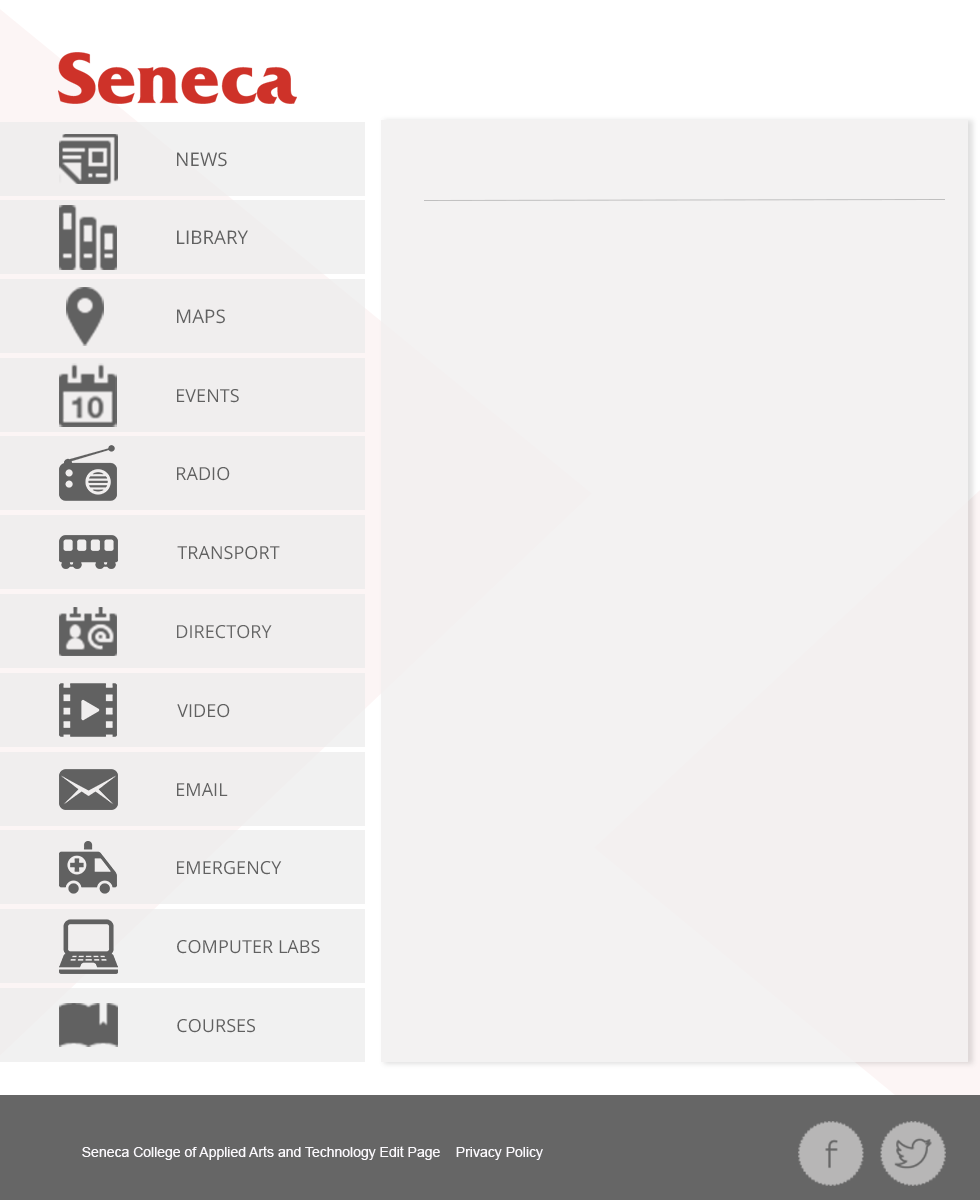
<style>
.page{position:relative;width:980px;height:1200px;background:#f3f2f2}
.page>*{position:absolute;margin:0}
.t1{font:18.7px "OpenSans";color:#616161;text-transform:uppercase}
.t2{font:18px "OpenSans";color:#616161;text-transform:uppercase}
.t3{font:18px "OpenSans";color:#666666;text-transform:uppercase}
.t4{font:14px "ArialMT";color:#fbf9fd}
</style>
<div class="page">
<p class="t1" style="left:177px;top:152px;width:50px;height:15px">News</p>
<p class="t1" style="left:177px;top:230px;width:71px;height:14px">Library</p>
<p class="t1" style="left:177px;top:309px;width:48px;height:15px">Maps</p>
<p class="t2" style="left:177px;top:389px;width:62px;height:14px">Events</p>
<p class="t2" style="left:177px;top:467px;width:53px;height:14px">Radio</p>
<p class="t2" style="left:177px;top:546px;width:103px;height:14px">Transport</p>
<p class="t3" style="left:177px;top:625px;width:95px;height:14px">Directory</p>
<p class="t2" style="left:177px;top:704px;width:53px;height:14px">Video</p>
<p class="t2" style="left:177px;top:783px;width:51px;height:13px">Email</p>
<p class="t2" style="left:177px;top:861px;width:105px;height:14px">Emergency</p>
<p class="t2" style="left:177px;top:940px;width:143px;height:14px">Computer Labs</p>
<p class="t2" style="left:177px;top:1019px;width:78px;height:14px">Courses</p>
<p class="t4" style="left:82px;top:1146px;width:461px;height:14px">Seneca College of Applied Arts and Technology Edit Page    Privacy Policy</p>
</div>
